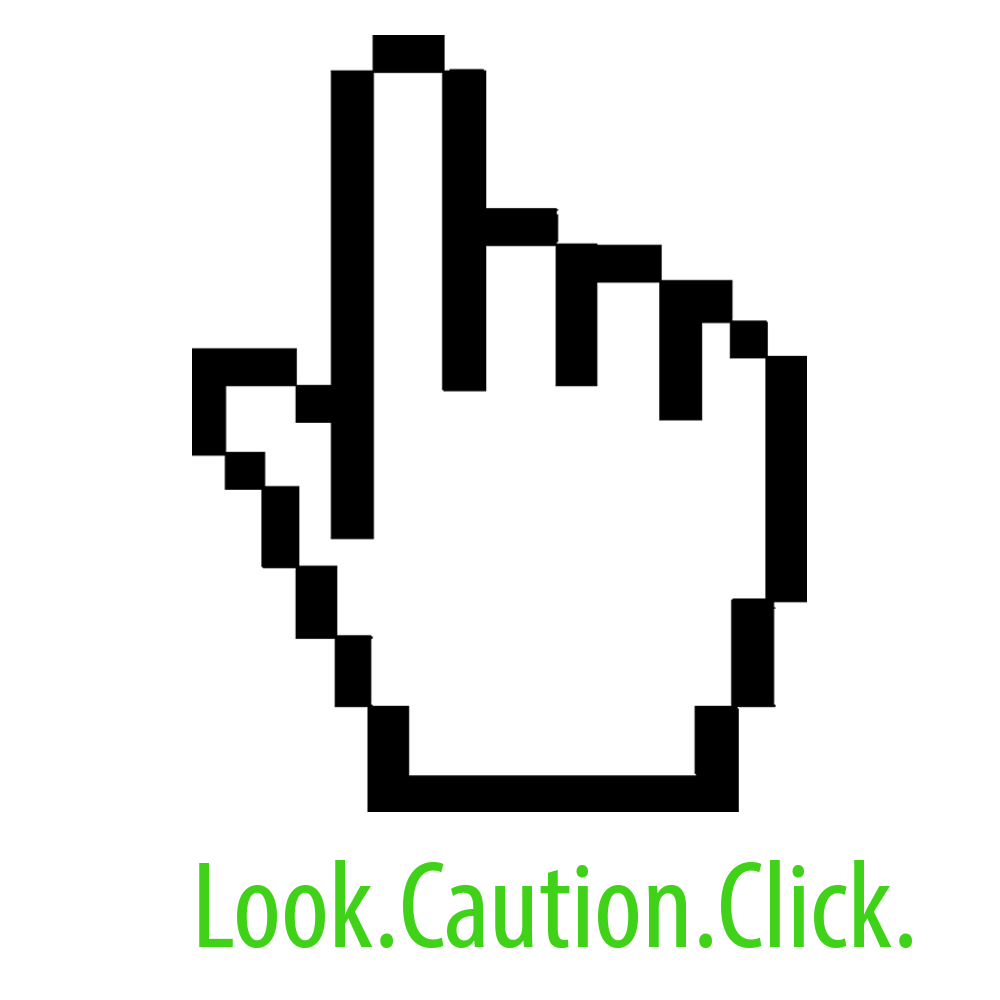
<style>
.page{position:relative;width:1000px;height:1000px;background:#ffffff}
.page>*{position:absolute;margin:0}
.t1{font:125px "MyriadPro-Cond";color:#3fd218}
</style>
<div class="page">
<p class="t1" style="left:199px;top:860px;width:713px;height:89px">Look.Caution.Click.</p>
</div>
